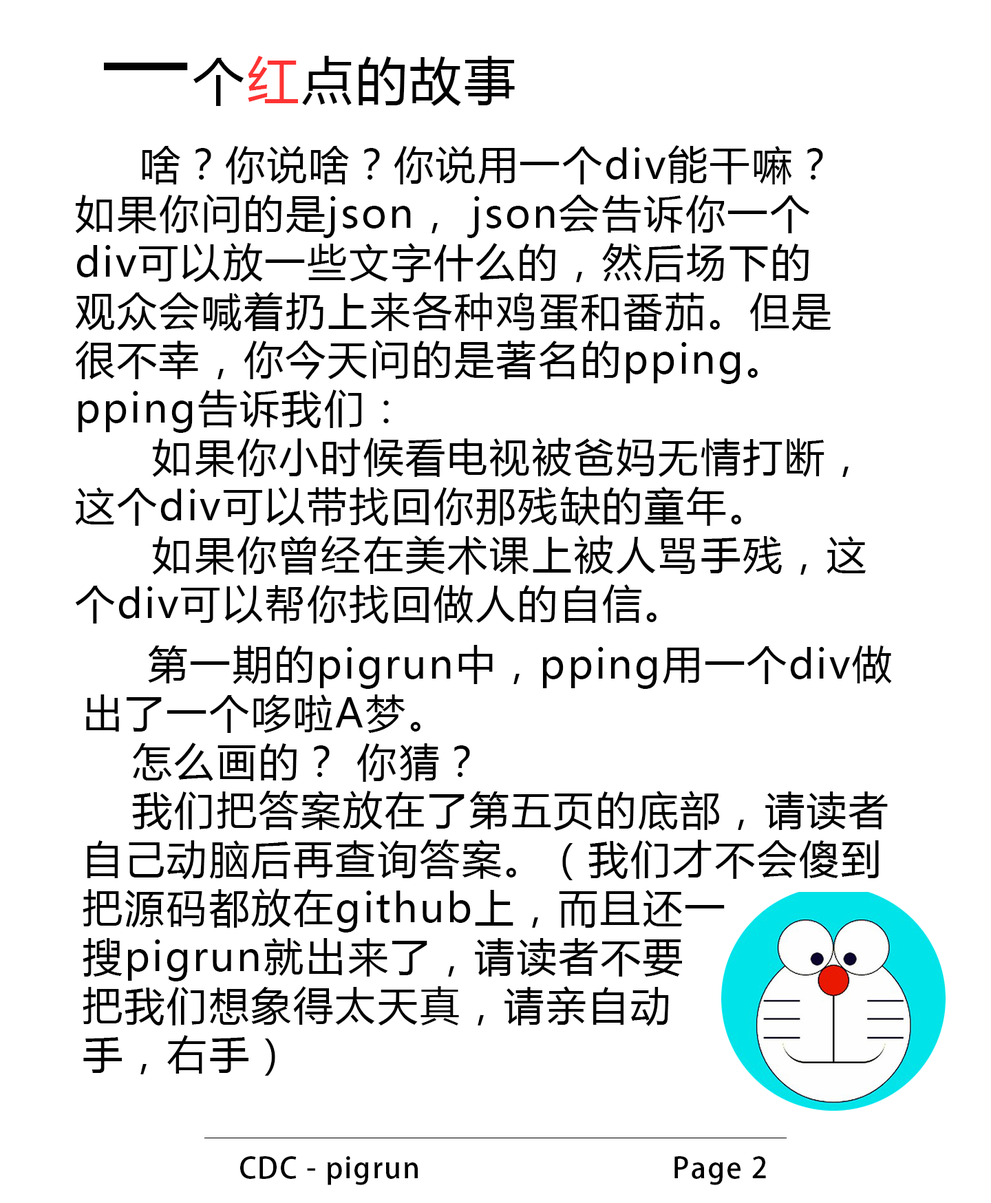
<style>
.page{position:relative;width:991px;height:1203px;background:#ffffff}
.page>*{position:absolute;margin:0}
.t1{font:51.6px "MicrosoftYaHei";letter-spacing:0.05em;color:#000000}
.t2{font:86px "MicrosoftYaHei";letter-spacing:0.05em;color:#000000}
.t3{font:51.6px "MicrosoftYaHei";letter-spacing:0.05em;color:#fe3333}
.t4{font:40.1px/48.8px "MicrosoftYaHei";letter-spacing:0.05em;color:#000000}
.t5{font:31.5px/48.8px "MicrosoftYaHei";letter-spacing:0.05em;color:#000000}
.t6{font:28.7px "AdobeHeitiStd-Regular";letter-spacing:0.05em;color:#000000}
</style>
<div class="page">
<p class="t1" style="left:103px;top:56px;width:412px;height:50px"><span class="t2">一</span>个<span class="t3">红</span>点的故事</p>
<p class="t4" style="left:75px;top:145px;width:791px;height:479px"><span class="t5">      </span>啥？你说啥？你说用一个div能干嘛？ <br>如果你问的是json， json会告诉你一个<br>div可以放一些文字什么的，然后场下的<br>观众会喊着扔上来各种鸡蛋和番茄。但是<br>很不幸，你今天问的是著名的pping。<br>pping告诉我们：<br>    如果你小时候看电视被爸妈无情打断，<br>这个div可以带找回你那残缺的童年。<br>    如果你曾经在美术课上被人骂手残，这<br>个div可以帮你找回做人的自信。</p>
<p class="t4" style="left:83px;top:645px;width:809px;height:431px"><span class="t5">      </span>第一期的pigrun中，pping用一个div做<br>出了一个哆啦A梦。<br>  怎么画的？ 你猜？<br>  我们把答案放在了第五页的底部，请读者<br>自己动脑后再查询答案。（我们才不会傻到<br>把源码都放在github上，而且还一<br>搜pigrun就出来了，请读者不要<br>把我们想象得太天真，请亲自动<br>手，右手）</p>
<p class="t6" style="left:240px;top:1156px;width:526px;height:29px">CDC - pigrun                                Page 2</p>
</div>
